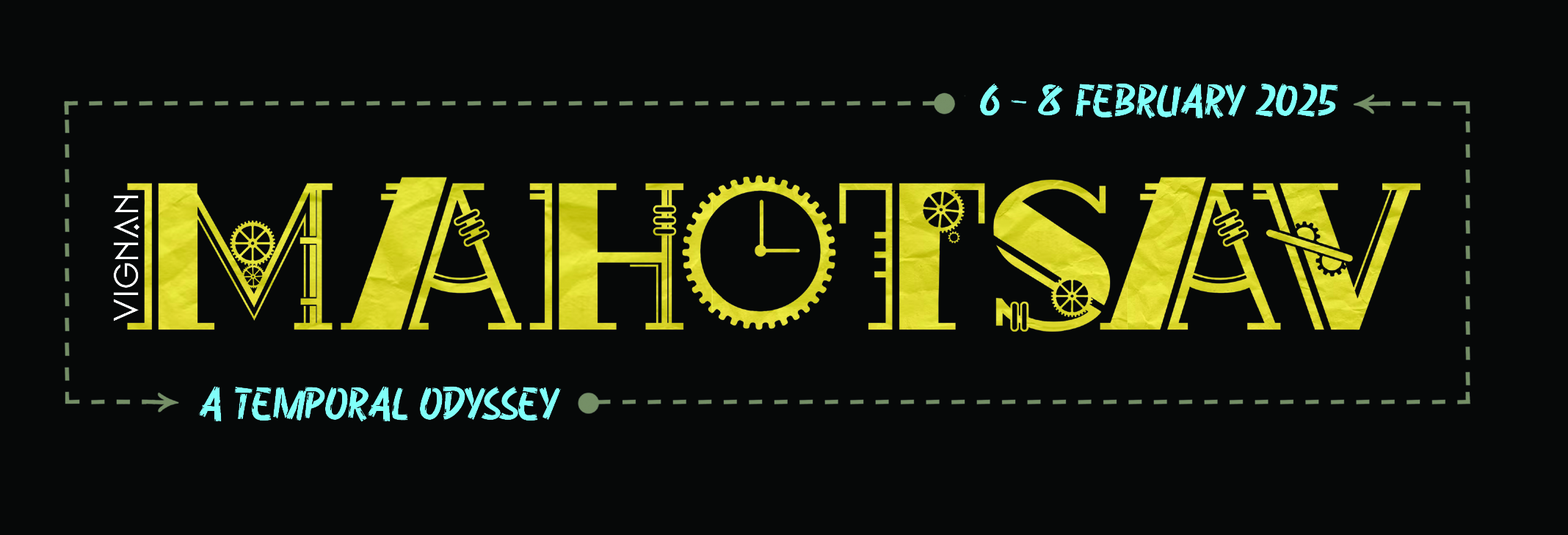
<style>
.page{position:relative;width:1568px;height:535px;background:#060808}
.page>*{position:absolute;margin:0}
.t1{font:86.9px "Woodtrap-Regular";color:#80fff9}
.t2{font:60.8px "ArtographieLight";color:#ffffff}
</style>
<div class="page">
<p class="t1" style="left:980px;top:83px;width:358px;height:36px">6 - 8 FEBRUARY 2025</p>
<p class="t2" style="left:113px;top:195px;width:27px;height:127px;rotate:-90deg">VIGNAN</p>
<p class="t1" style="left:198px;top:386px;width:363px;height:36px">A TEMPORAL ODYSSEY</p>
</div>
